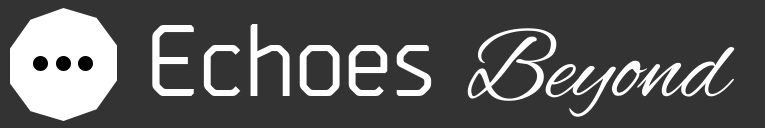
<style>
.page{position:relative;width:765px;height:128px;background:#333333}
.page>*{position:absolute;margin:0}
.t1{font:101.3px "Borda-Regular12";color:#ffffff}
.t2{font:101.3px "AlexBrush-Regular";color:#ffffff}
</style>
<div class="page">
<p class="t1" style="left:152px;top:24px;width:583px;height:93px">Echoes <span class="t2">Beyond</span></p>
</div>
